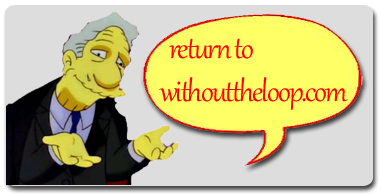
<style>
.page{position:relative;width:381px;height:195px;background:#dddddd}
.page>*{position:absolute;margin:0}
.t1{font:36px "Gabriola";letter-spacing:-0.05em;color:#ff0000}
</style>
<div class="page">
<p class="t1" style="left:159px;top:38px;width:189px;height:72px">return to <br>withouttheloop.com</p>
</div>
